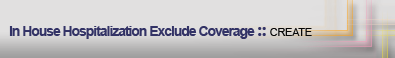
<style>
.page{position:relative;width:395px;height:58px;background:#e1e0e0}
.page>*{position:absolute;margin:0}
.t1{font:14px "Arial-BoldMT";letter-spacing:-0.075em;color:#333366}
.t2{font:18px "SegoeUI-Bold";letter-spacing:-0.025em;color:#333366}
.t3{font:11px "ArialMT";letter-spacing:-0.025em;color:#070707}
</style>
<div class="page">
<p class="t1" style="left:9px;top:26px;width:303px;height:13px">In House Hospitalization Exclude Coverage <span class="t2">:: </span><span class="t3">CREATE</span></p>
</div>
